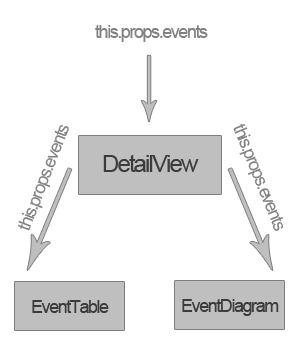
<style>
.page{position:relative;width:300px;height:360px;background:#ffffff}
.page>*{position:absolute;margin:0}
.t1{font:18px "ArialMT";letter-spacing:-0.08em;color:#818181}
.t2{font:24px "ArialMT";letter-spacing:-0.08em;color:#3b3b3b}
.t3{font:18px "ArialMT";letter-spacing:-0.08em;color:#3b3b3b}
</style>
<div class="page">
<p class="t1" style="left:95px;top:25px;width:113px;height:17px">this.props.events</p>
<p class="t1" style="left:18px;top:124px;width:51px;height:107px;rotate:-69deg">this.props.events</p>
<p class="t1" style="left:233px;top:123px;width:51px;height:108px;rotate:68deg">this.props.events</p>
<p class="t2" style="left:103px;top:154px;width:96px;height:18px">DetailView</p>
<p class="t3" style="left:32px;top:300px;width:77px;height:13px">EventTable</p>
<p class="t3" style="left:182px;top:299px;width:97px;height:17px">EventDiagram</p>
</div>
